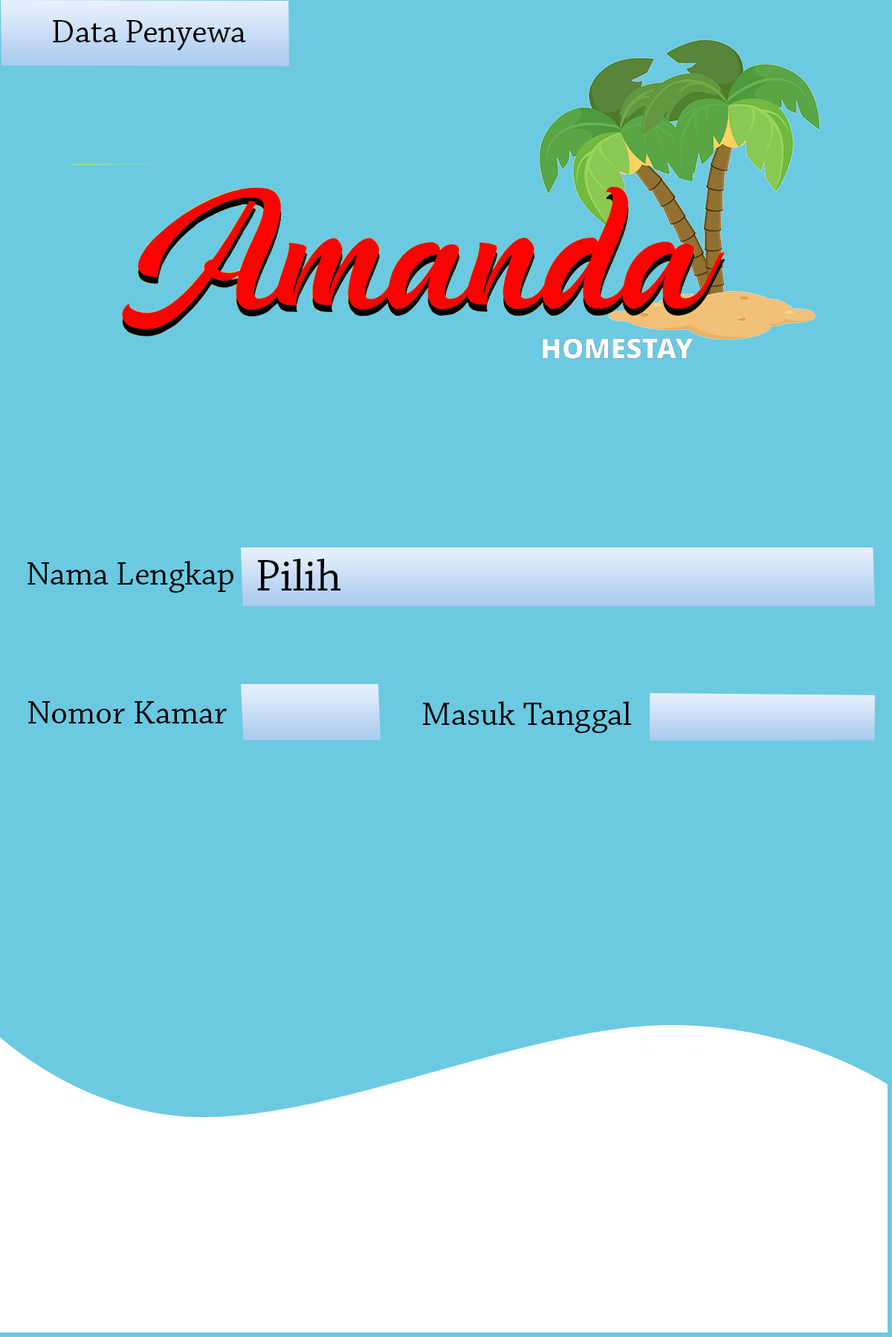
<style>
.page{position:relative;width:892px;height:1337px;background:#6bcae2}
.page>*{position:absolute;margin:0}
.t1{font:34.1px "ChaparralPro-Regular";color:#000101}
.t2{font:46.1px "ChaparralPro-Regular";color:#000101}
</style>
<div class="page">
<p class="t1" style="left:53px;top:20px;width:193px;height:31px">Data Penyewa</p>
<p class="t1" style="left:27px;top:561px;width:206px;height:32px">Nama Lengkap</p>
<p class="t2" style="left:257px;top:559px;width:83px;height:32px">Pilih</p>
<p class="t1" style="left:28px;top:701px;width:199px;height:23px">Nomor Kamar</p>
<p class="t1" style="left:423px;top:701px;width:208px;height:32px">Masuk Tanggal</p>
</div>
